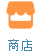
<style>
.page{position:relative;width:40px;height:55px;background:#ffffff}
.page>*{position:absolute;margin:0}
.t1{font:21.2px "SimSun";letter-spacing:0.075em;color:#4788b2;font-variant:small-caps}
</style>
<div class="page">
<p class="t1" style="left:8px;top:39px;width:24px;height:12px">商店</p>
</div>
